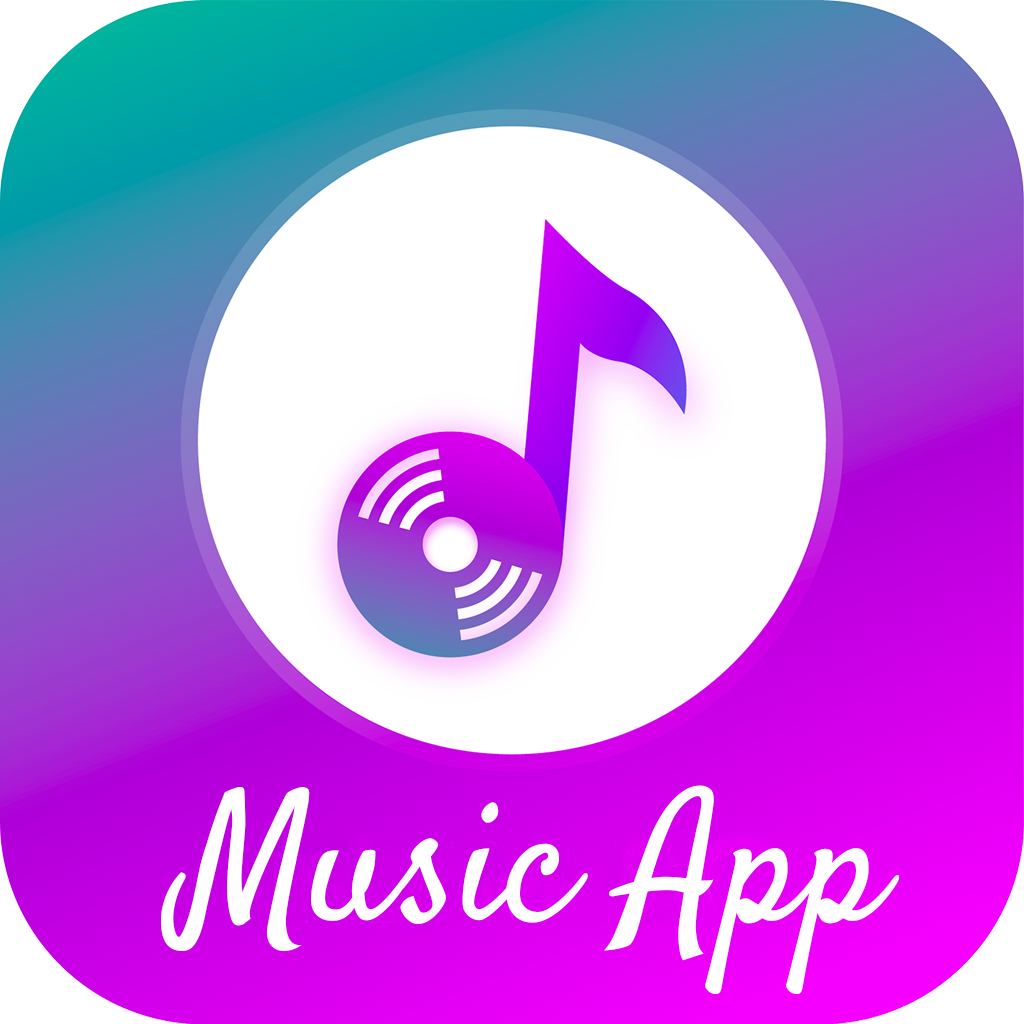
<style>
.page{position:relative;width:1024px;height:1024px;background:#ffffff}
.page>*{position:absolute;margin:0}
.t1{font:180px "Satisfy-Regular";color:#ffffff}
</style>
<div class="page">
<p class="t1" style="left:161px;top:785px;width:739px;height:209px">Music App</p>
</div>
